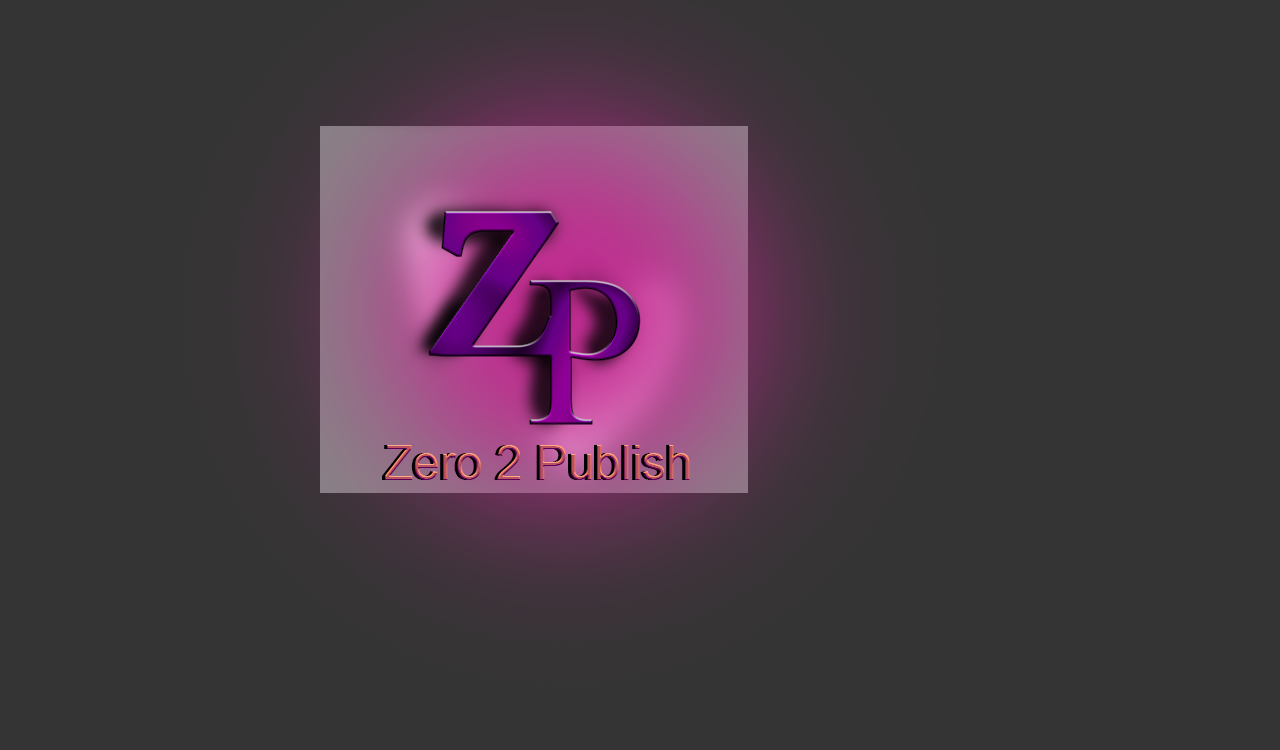
<style>
.page{position:relative;width:1280px;height:750px;background:#343434}
.page>*{position:absolute;margin:0}
.t1{font:48px "ArialMT"}
</style>
<div class="page">
<p class="t1" style="left:382px;top:445px;width:305px;height:35px">Zero 2 Publish</p>
</div>
